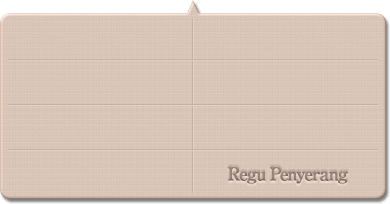
<style>
.page{position:relative;width:390px;height:204px}
.page>*{position:absolute;margin:0}
.t1{font:18px "RyuminPro-ExBold";letter-spacing:-0.08em;color:#9c8c83}
</style>
<div class="page">
<p class="t1" style="left:227px;top:167px;width:121px;height:17px">Regu Penyerang</p>
</div>
